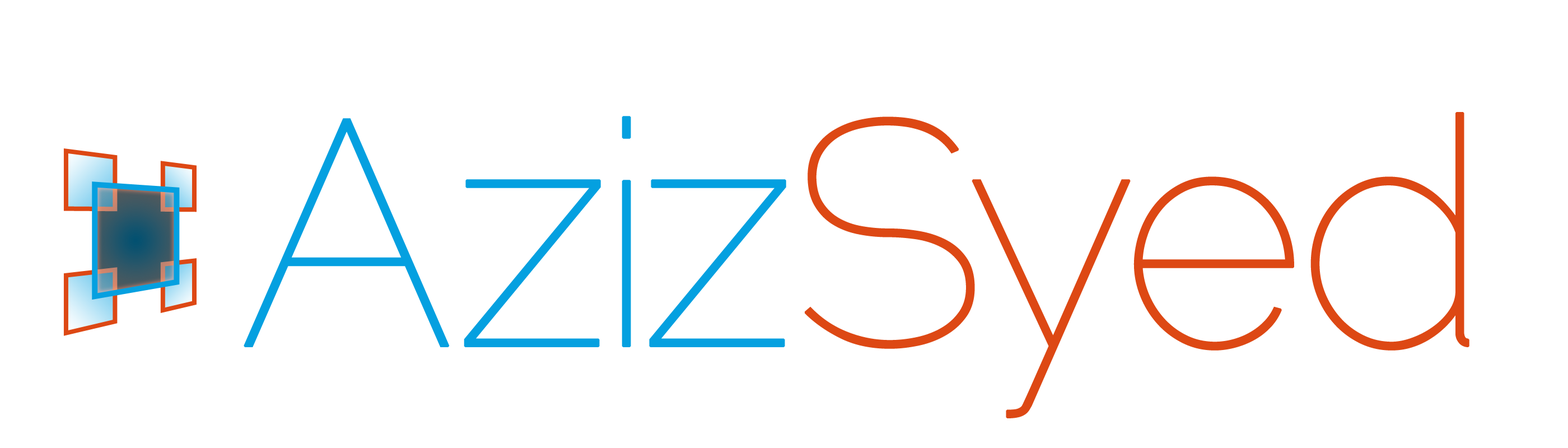
<style>
.page{position:relative;width:1568px;height:448px;background:#ffffff}
.page>*{position:absolute;margin:0}
.t1{font:319.2px "Raleway-Thin";letter-spacing:-0.03em;color:#04a0e0;font-weight:bold}
.t2{font:319.2px "Raleway-Thin";letter-spacing:-0.03em;color:#dd4814;font-weight:bold}
</style>
<div class="page">
<p class="t1" style="left:244px;top:112px;width:1225px;height:306px">Aziz<span class="t2">Syed</span></p>
</div>
